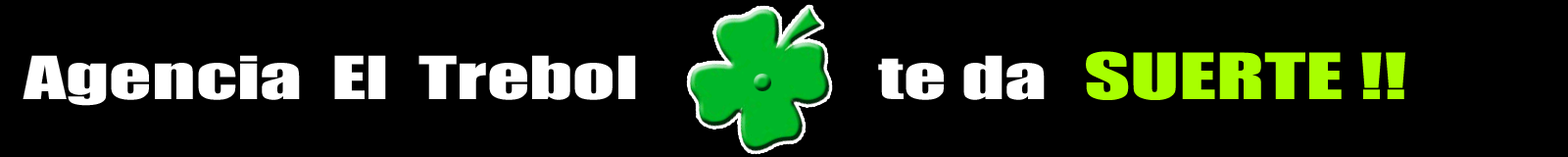
<style>
.page{position:relative;width:1568px;height:157px;background:#000000}
.page>*{position:absolute;margin:0}
.t1{font:58.8px "Impact";color:#a8ff00;scale:1.52 1}
.t2{font:54.9px "Impact";color:#ffffff;scale:1.52 1}
</style>
<div class="page">
<p class="t1" style="left:1086px;top:51px;width:320px;height:49px">SUERTE !!</p>
<p class="t2" style="left:23px;top:55px;width:613px;height:51px">Agencia  El  Trebol</p>
<p class="t2" style="left:878px;top:55px;width:167px;height:45px">te da</p>
</div>
